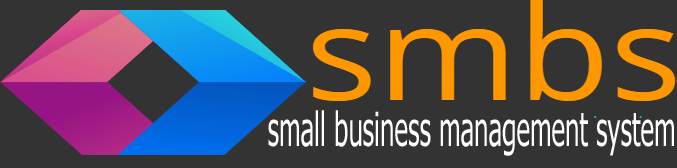
<style>
.page{position:relative;width:677px;height:168px;background:#333333}
.page>*{position:absolute;margin:0}
.t1{font:47px "Tahoma";color:#ffffff;scale:0.55 1}
</style>
<div class="page">
<p class="t1" style="left:268px;top:110px;width:406px;height:46px">small business management system</p>
</div>
